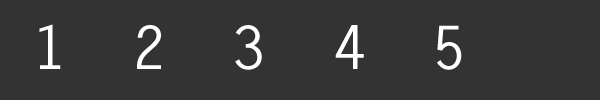
<style>
.page{position:relative;width:600px;height:100px;background:#333333}
.page>*{position:absolute;margin:0}
.t1{font:60px "LetterGothicStd-Bold";color:#ffffff}
</style>
<div class="page">
<p class="t1" style="left:39px;top:24px;width:22px;height:45px">1</p>
<p class="t1" style="left:137px;top:25px;width:24px;height:44px">2</p>
<p class="t1" style="left:235px;top:25px;width:27px;height:45px">3</p>
<p class="t1" style="left:335px;top:25px;width:29px;height:44px">4</p>
<p class="t1" style="left:437px;top:25px;width:25px;height:45px">5</p>
</div>
